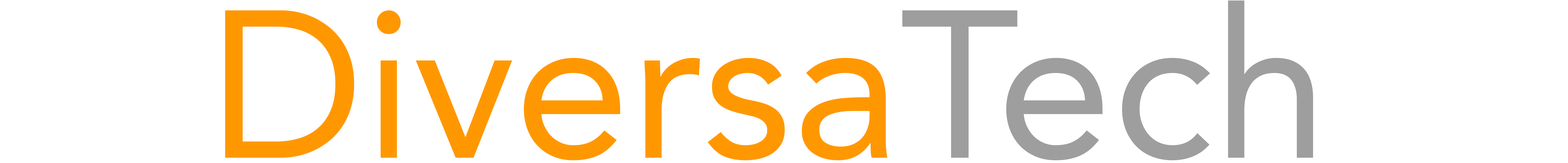
<style>
.page{position:relative;width:1568px;height:163px;background:#ffffff}
.page>*{position:absolute;margin:0}
.t1{font:208.2px "Avenir-Roman";color:#ff9800}
.t2{font:208.2px "Avenir-Roman";color:#9e9e9e}
</style>
<div class="page">
<p class="t1" style="left:225px;top:0px;width:1088px;height:161px">Diversa<span class="t2">Tech</span></p>
</div>
